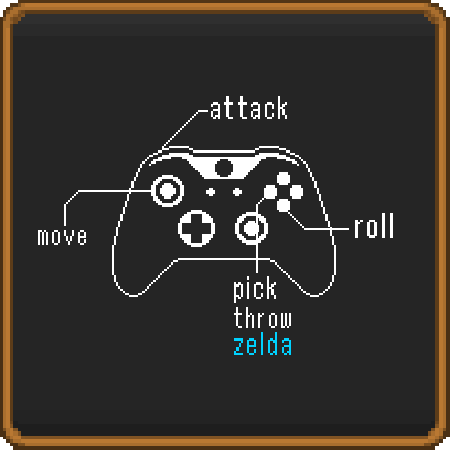
<style>
.page{position:relative;width:450px;height:450px;background:#252525}
.page>*{position:absolute;margin:0}
.t1{font:32.8px "ReturnOfGanonReg";color:#ffffff;scale:1.1 1}
.t2{font:36.3px "ReturnOfGanonReg";color:#ffffff;scale:1.1 1}
.t3{font:29.5px "ReturnOfGanonReg";color:#ffffff;scale:1.1 1}
.t4{font:32.6px "ReturnOfGanonReg";color:#ffffff;scale:1.1 1}
.t5{font:30.3px "ReturnOfGanonReg";color:#ffffff;scale:1.1 1}
.t6{font:33.3px "ReturnOfGanonReg";color:#00d2ff;scale:1.1 1}
</style>
<div class="page">
<p class="t1" style="left:211px;top:96px;width:76px;height:23px">attack</p>
<p class="t2" style="left:355px;top:213px;width:38px;height:25px">roll</p>
<p class="t3" style="left:38px;top:230px;width:48px;height:15px">move</p>
<p class="t4" style="left:234px;top:276px;width:42px;height:27px">pick</p>
<p class="t5" style="left:234px;top:307px;width:57px;height:21px">throw</p>
<p class="t6" style="left:234px;top:332px;width:57px;height:23px">zelda</p>
</div>
